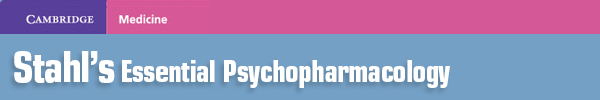
<style>
.page{position:relative;width:600px;height:100px;background:#74a0c5}
.page>*{position:absolute;margin:0}
.t1{font:30px "EurostileLTPro-BoldCn";letter-spacing:-0.025em;color:#ffffff}
.t2{font:42px "EurostileLTPro-BoldCn";letter-spacing:-0.025em;color:#ffffff}
</style>
<div class="page">
<p class="t1" style="left:14px;top:51px;width:436px;height:37px"><span class="t2">Stahl’s </span>Essential Psychopharmacology</p>
</div>
